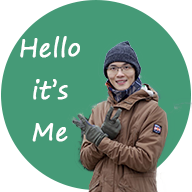
<style>
.page{position:relative;width:192px;height:192px;background:#459a77}
.page>*{position:absolute;margin:0}
.t1{font:24px "SegoePrint";color:#ffffff;font-weight:bold}
</style>
<div class="page">
<p class="t1" style="left:20px;top:36px;width:60px;height:106px;text-align:center">Hello<br>it’s<br>Me</p>
</div>
